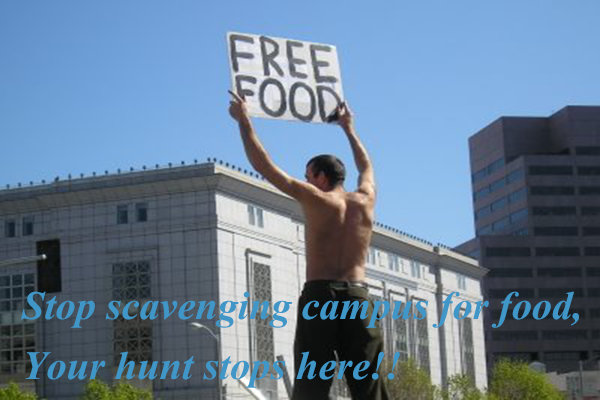
<style>
.page{position:relative;width:600px;height:400px}
.page>*{position:absolute;margin:0}
.t1{font:50px "Vijaya-Bold";color:#4096c7}
</style>
<div class="page">
<p class="t1" style="left:21px;top:291px;width:558px;height:97px">Stop scavenging campus for food,<br>Your hunt stops here!!</p>
</div>
